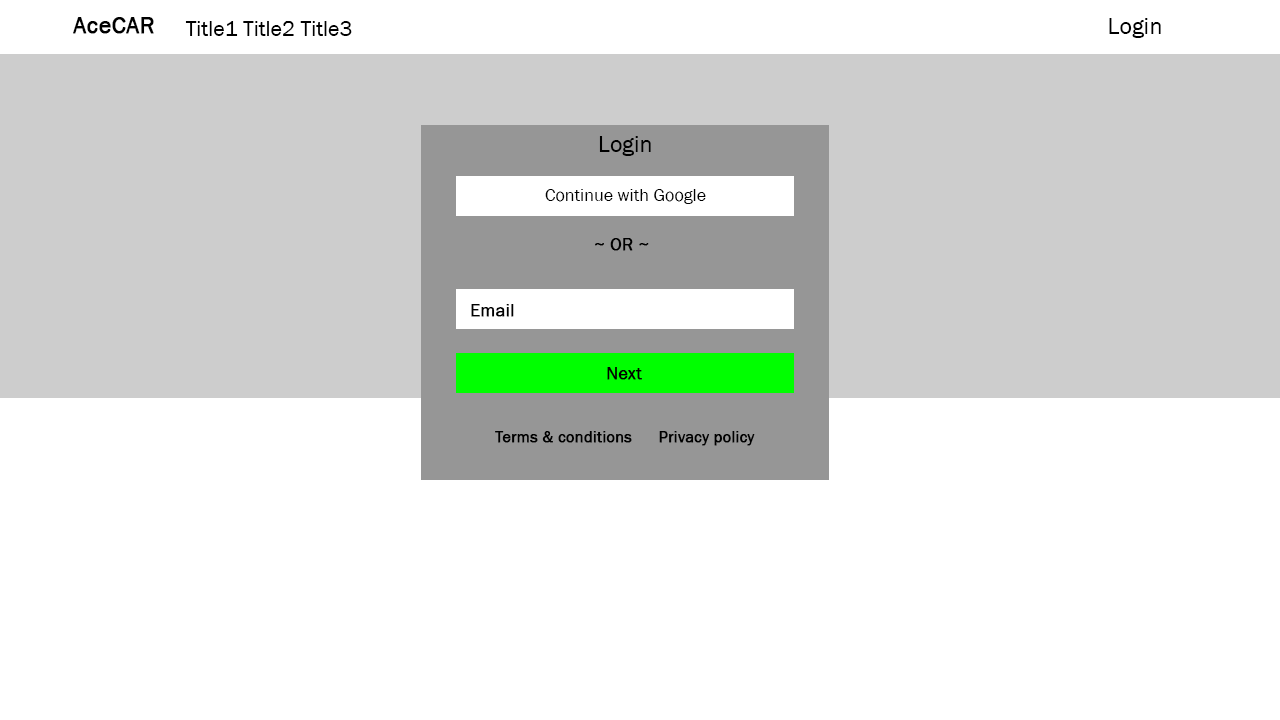
<style>
.page{position:relative;width:1280px;height:720px;background:#ffffff}
.page>*{position:absolute;margin:0}
.t1{font:24px "FranklinGothic-Book";color:#000000;font-weight:bold}
.t2{font:22px "FranklinGothic-Book";color:#000000}
.t3{font:24px "FranklinGothic-Book";color:#000000}
.t4{font:18px "FranklinGothic-Book";color:#000000}
.t5{font:18px "FranklinGothic-Book";color:#000000;font-weight:bold}
.t6{font:16px "FranklinGothic-Book";color:#000000;font-weight:bold}
</style>
<div class="page">
<p class="t1" style="left:73px;top:17px;width:81px;height:17px">AceCAR</p>
<p class="t2" style="left:185px;top:21px;width:167px;height:15px">Title1 Title2 Title3</p>
<p class="t3" style="left:1109px;top:18px;width:52px;height:20px">Login</p>
<p class="t3" style="left:599px;top:136px;width:52px;height:20px">Login</p>
<p class="t4" style="left:545px;top:189px;width:161px;height:15px">Continue with Google</p>
<p class="t5" style="left:595px;top:238px;width:54px;height:13px">~ OR ~</p>
<p class="t5" style="left:471px;top:304px;width:43px;height:13px">Email</p>
<p class="t5" style="left:607px;top:367px;width:35px;height:13px">Next</p>
<p class="t6" style="left:495px;top:431px;width:260px;height:15px">Terms &amp; conditions      Privacy policy</p>
</div>
